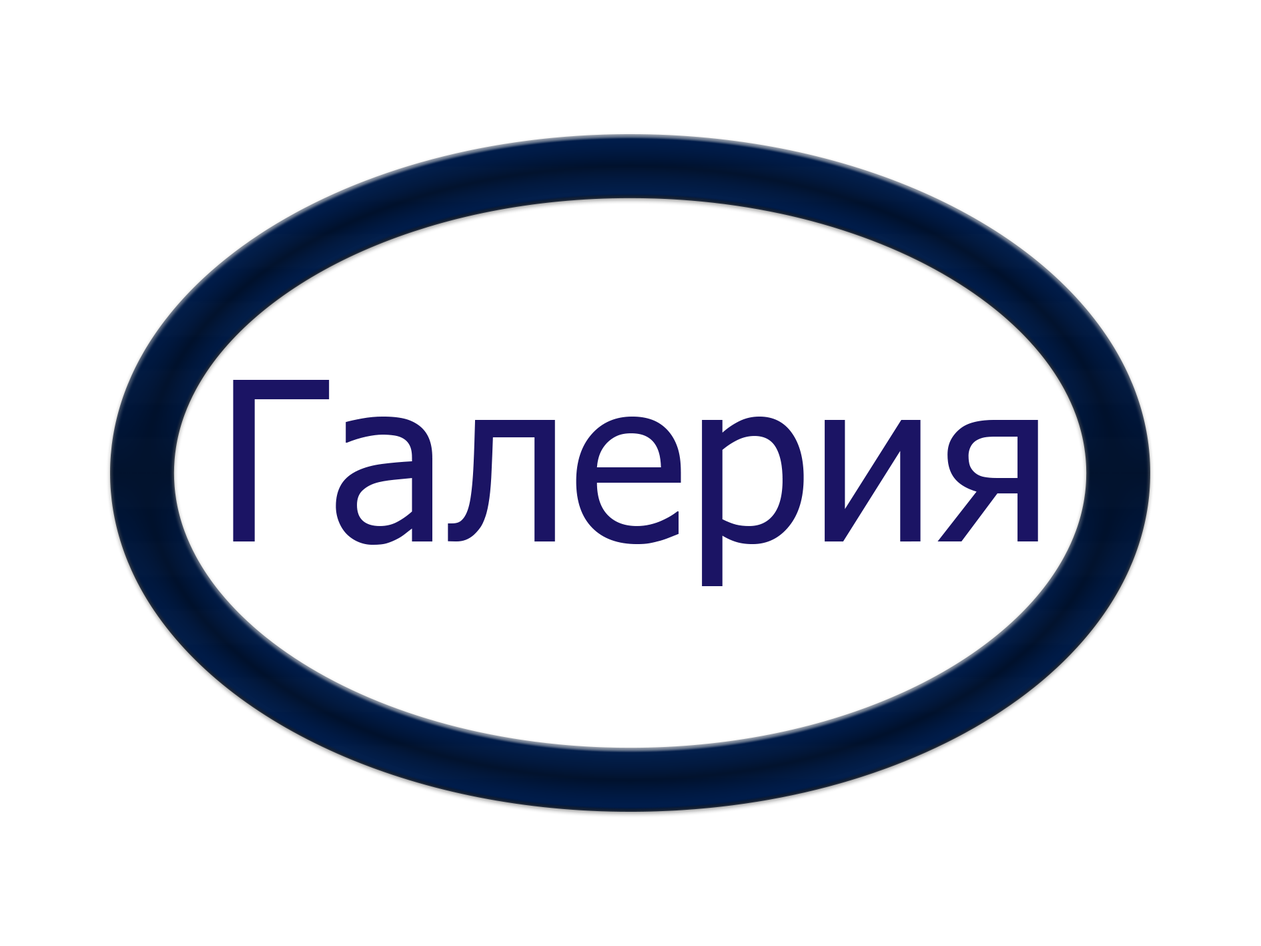
<style>
.page{position:relative;width:1261px;height:946px;background:#ffffff}
.page>*{position:absolute;margin:0}
.t1{font:222.4px "Tahoma";color:#1b1464}
.t2{font:194.6px "Microsoft-Himalaya";color:#1b1464}
</style>
<div class="page">
<p class="t1" style="left:233px;top:380px;width:805px;height:206px"><span class="t2"> </span>Галерия</p>
</div>
